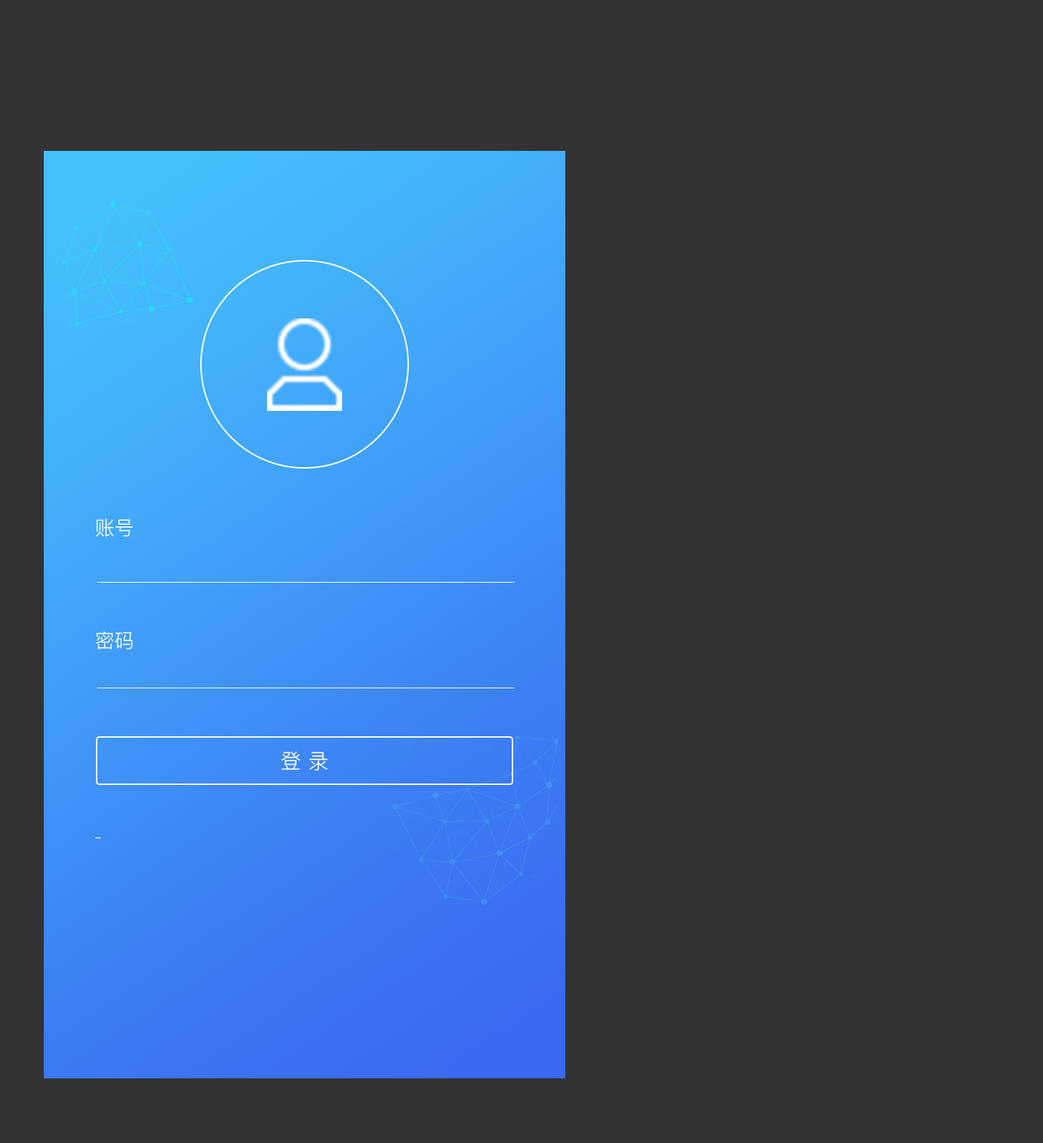
<style>
.page{position:relative;width:1043px;height:1143px;background:#333333}
.page>*{position:absolute;margin:0}
.t1{font:19.5px "PingFang-SC-Regular";color:#ffffff}
.t2{font:20.9px "PingFang-SC-Regular";color:#ffffff}
</style>
<div class="page">
<p class="t1" style="left:95px;top:519px;width:38px;height:18px">账号</p>
<p class="t1" style="left:96px;top:631px;width:37px;height:18px">密码</p>
<p class="t2" style="left:281px;top:752px;width:47px;height:19px">登 录</p>
</div>
